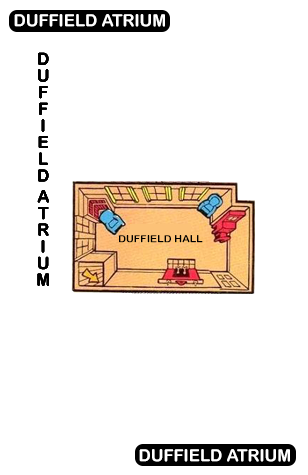
<style>
.page{position:relative;width:308px;height:475px;background:#ffffff}
.page>*{position:absolute;margin:0}
.t1{font:16.7px "ArialRoundedMTBold";color:#ffffff}
.t2{font:10px "ArialRoundedMTBold";color:#000000;scale:1.06 1}
</style>
<div class="page">
<p class="t1" style="left:14px;top:14px;width:151px;height:13px">DUFFIELD ATRIUM</p>
<p class="t2" style="left:119px;top:235px;width:84px;height:8px">DUFFIELD HALL</p>
<p class="t1" style="left:139px;top:449px;width:151px;height:13px">DUFFIELD ATRIUM</p>
</div>
